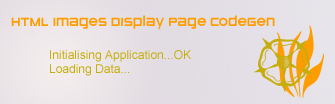
<style>
.page{position:relative;width:335px;height:104px}
.page>*{position:absolute;margin:0}
.t1{font:14px "STOMP_Zeroes";color:#ff9c00}
.t2{font:12px "ArialMT";color:#c5ad0f}
</style>
<div class="page">
<p class="t1" style="left:11px;top:15px;width:264px;height:15px">HTML Images Display Page CodeGen</p>
<p class="t2" style="left:50px;top:50px;width:141px;height:26px">Initialising Application...OK<br>Loading Data...</p>
</div>
